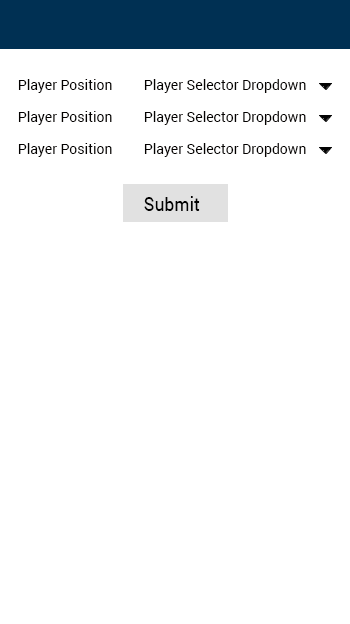
<style>
.page{position:relative;width:350px;height:624px;background:#ffffff}
.page>*{position:absolute;margin:0}
.t1{font:14px "Roboto-Regular";color:#040201}
.t2{font:19.2px "Roboto-Regular";color:#020202;scale:0.91 1}
</style>
<div class="page">
<p class="t1" style="left:18px;top:79px;width:94px;height:14px">Player Position</p>
<p class="t1" style="left:144px;top:79px;width:162px;height:14px">Player Selector Dropdown</p>
<p class="t1" style="left:18px;top:111px;width:94px;height:14px">Player Position</p>
<p class="t1" style="left:144px;top:111px;width:162px;height:14px">Player Selector Dropdown</p>
<p class="t1" style="left:18px;top:143px;width:94px;height:14px">Player Position</p>
<p class="t1" style="left:144px;top:143px;width:162px;height:14px">Player Selector Dropdown</p>
<p class="t2" style="left:144px;top:196px;width:56px;height:15px">Submit</p>
</div>
